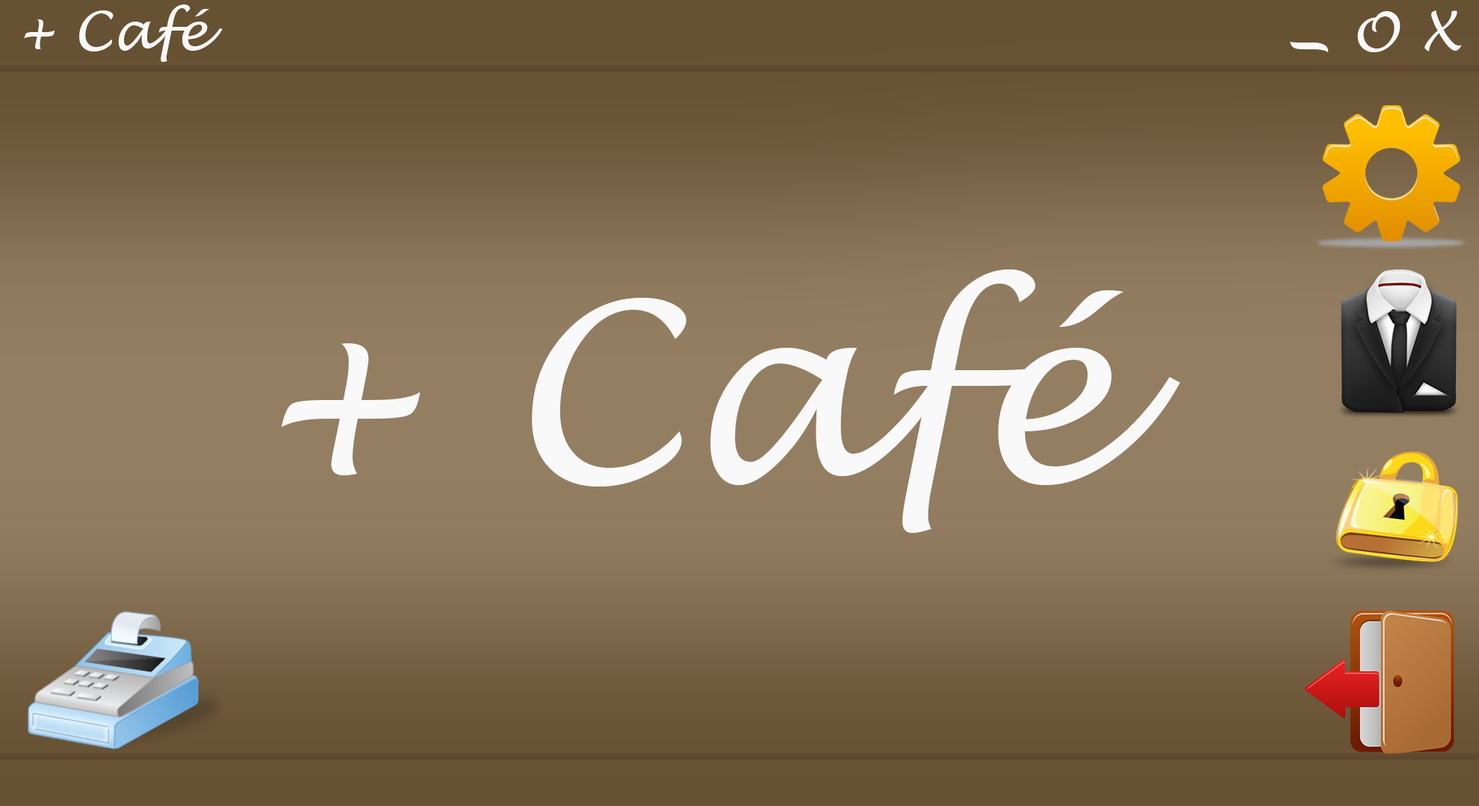
<style>
.page{position:relative;width:1479px;height:806px}
.page>*{position:absolute;margin:0}
.t1{font:54.8px "LucidaHandwriting-Italic";color:#f9f9f9}
.t2{font:89.6px "LucidaHandwriting-Italic";color:#f9f9f9}
.t3{font:248.9px "LucidaHandwriting-Italic";color:#f9f9f9}
</style>
<div class="page">
<p class="t1" style="left:24px;top:4px;width:199px;height:58px">+ Café</p>
<p class="t1" style="left:1357px;top:11px;width:43px;height:41px">O</p>
<p class="t1" style="left:1424px;top:10px;width:37px;height:42px">X</p>
<p class="t2" style="left:1290px;top:42px;width:38px;height:10px">_</p>
<p class="t3" style="left:281px;top:270px;width:899px;height:263px">+ Café</p>
</div>
